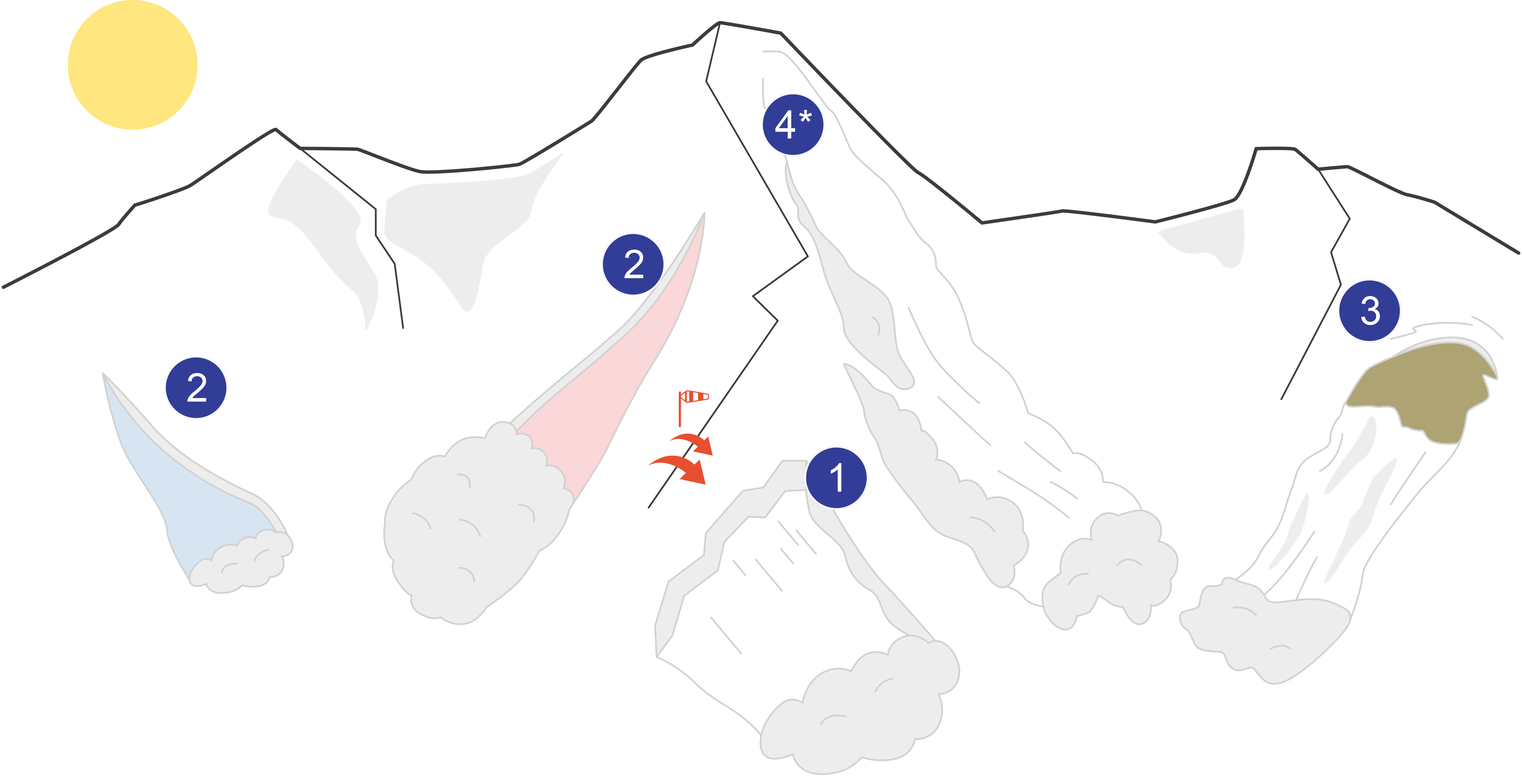
<style>
.page{position:relative;width:1522px;height:783px;background:#ffffff}
.page>*{position:absolute;margin:0}
.t1{font:39.7px "ArialMT";letter-spacing:0.075em;color:#ffffff}
</style>
<div class="page">
<p class="t1" style="left:775px;top:110px;width:37px;height:29px">4*</p>
<p class="t1" style="left:625px;top:250px;width:19px;height:28px">2</p>
<p class="t1" style="left:1361px;top:296px;width:19px;height:29px">3</p>
<p class="t1" style="left:187px;top:373px;width:19px;height:29px">2</p>
<p class="t1" style="left:831px;top:463px;width:11px;height:29px">1</p>
</div>
